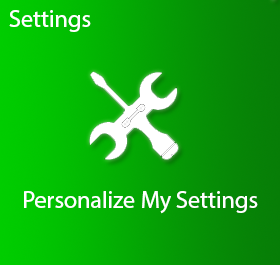
<style>
.page{position:relative;width:280px;height:265px}
.page>*{position:absolute;margin:0}
.t1{font:24px "MyriadHebrew-Regular";color:#ffffff}
</style>
<div class="page">
<p class="t1" style="left:9px;top:10px;width:82px;height:22px">Settings</p>
<p class="t1" style="left:24px;top:191px;width:234px;height:23px">Personalize My Settings</p>
</div>
